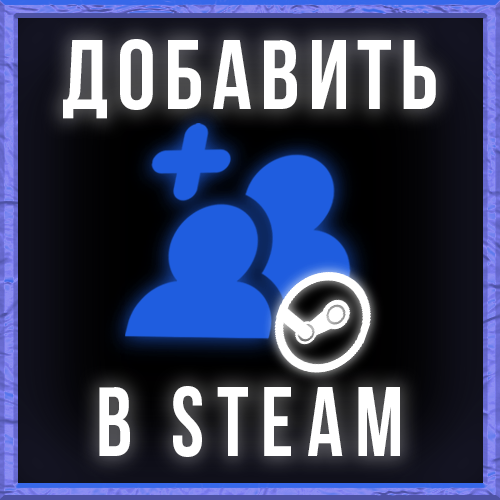
<style>
.page{position:relative;width:500px;height:500px}
.page>*{position:absolute;margin:0}
.t1{font:98px "BebasNeueBold";letter-spacing:0.08em;color:#ffffff}
.t2{font:98px "BebasNeueBold";letter-spacing:0.14em;color:#ffffff;scale:0.91 1}
</style>
<div class="page">
<p class="t1" style="left:63px;top:39px;width:373px;height:80px">добавить</p>
<p class="t2" style="left:99px;top:386px;width:301px;height:71px">в steam</p>
</div>
